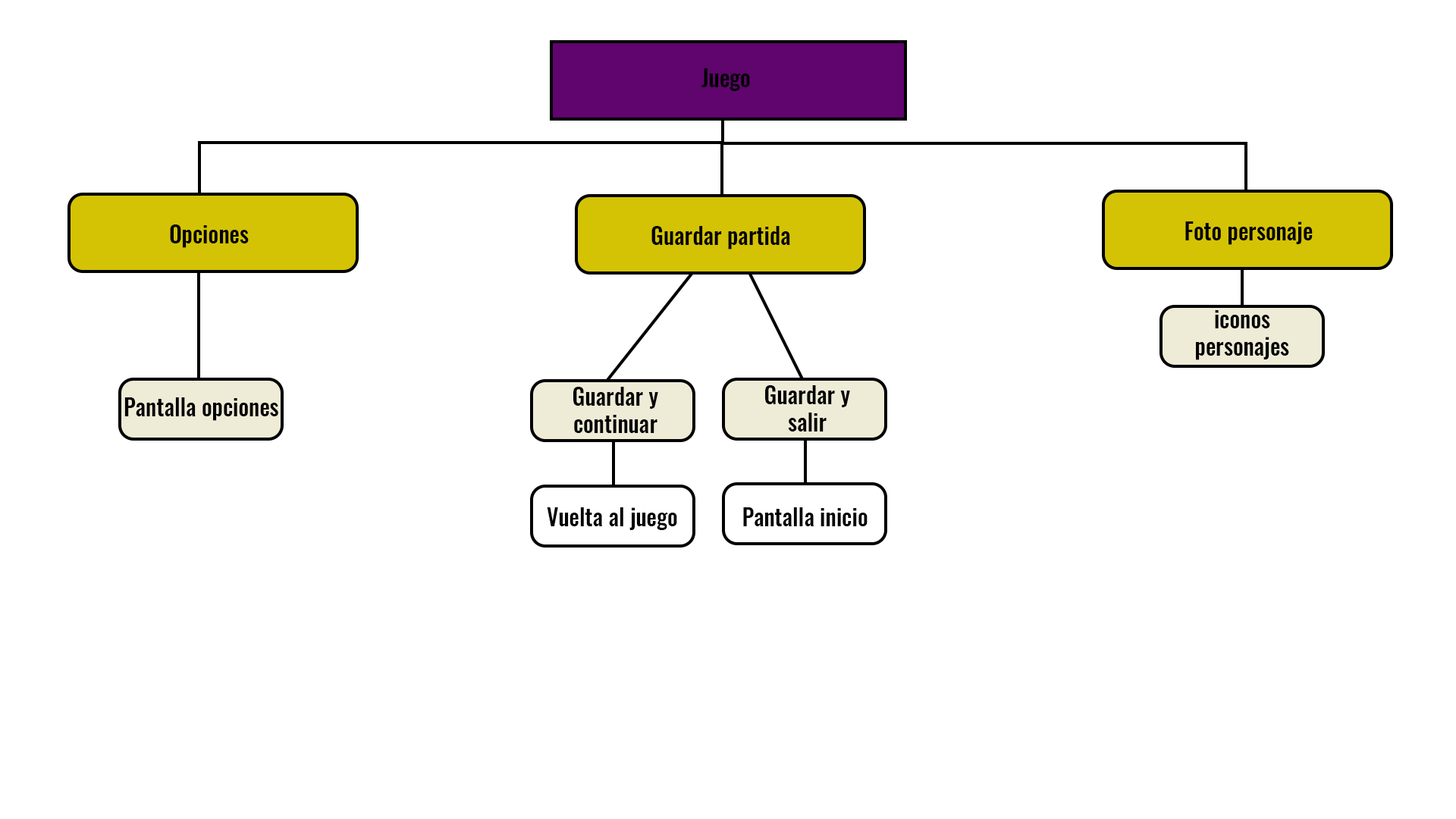
<style>
.page{position:relative;width:1456px;height:819px;background:#ffffff}
.page>*{position:absolute;margin:0}
.t1{font:22.7px "Oswald-Medium";color:#000000}
</style>
<div class="page">
<p class="t1" style="left:701px;top:68px;width:49px;height:23px">Juego</p>
<p class="t1" style="left:1185px;top:221px;width:128px;height:24px">Foto personaje</p>
<p class="t1" style="left:170px;top:224px;width:79px;height:24px">Opciones</p>
<p class="t1" style="left:651px;top:226px;width:139px;height:23px">Guardar partida</p>
<p class="t1" style="left:1196px;top:310px;width:93px;height:50px;text-align:center">iconos <br>personajes</p>
<p class="t1" style="left:573px;top:387px;width:85px;height:46px;text-align:center">Guardar y <br>continuar</p>
<p class="t1" style="left:765px;top:385px;width:85px;height:46px;text-align:center">Guardar y <br>salir</p>
<p class="t1" style="left:124px;top:397px;width:154px;height:24px">Pantalla opciones</p>
<p class="t1" style="left:547px;top:507px;width:130px;height:23px">Vuelta al juego</p>
<p class="t1" style="left:743px;top:507px;width:125px;height:19px">Pantalla inicio</p>
</div>
